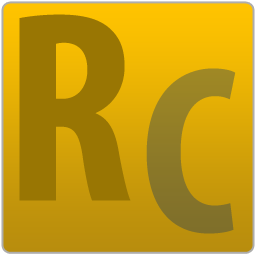
<style>
.page{position:relative;width:256px;height:256px;background:#997603}
.page>*{position:absolute;margin:0}
.t1{font:274.5px "MyriadPro-BoldCond";color:#997603}
.t2{font:240.2px "MyriadPro-BoldCond";color:#8d7a28}
</style>
<div class="page">
<p class="t1" style="left:19px;top:14px;width:112px;height:187px">R</p>
<p class="t2" style="left:146px;top:68px;width:90px;height:166px">C</p>
</div>
